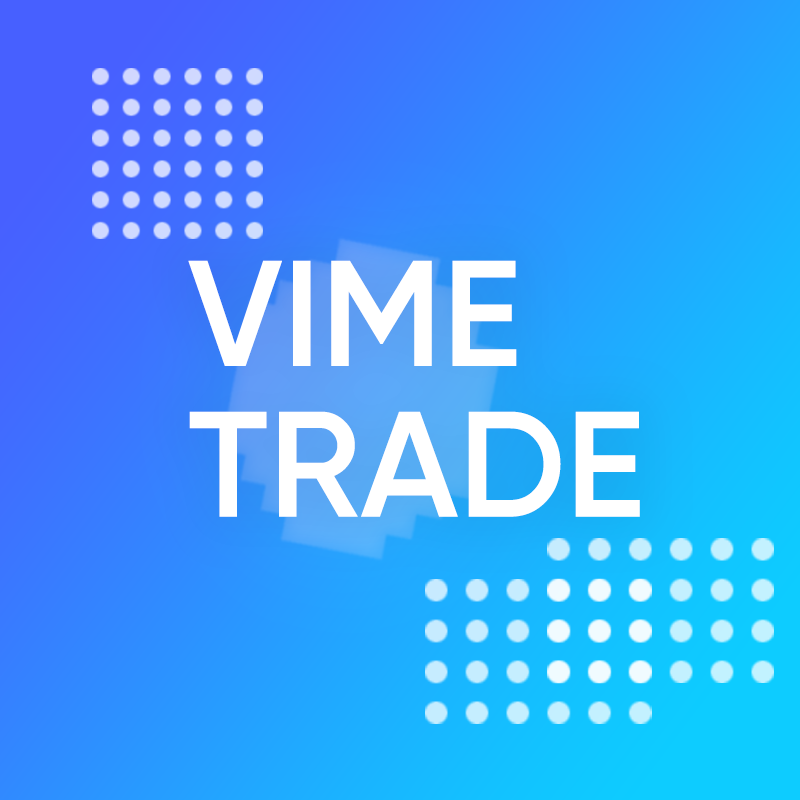
<style>
.page{position:relative;width:800px;height:800px}
.page>*{position:absolute;margin:0}
.t1{font:149.7px/150.8px "Gilroy-Semibold";color:#ffffff}
</style>
<div class="page">
<p class="t1" style="left:188px;top:260px;width:452px;height:257px">VIME<br>TRADE</p>
</div>
